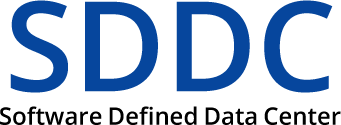
<style>
.page{position:relative;width:341px;height:125px;background:#ffffff}
.page>*{position:absolute;margin:0}
.t1{font:125px "OpenSans-Semibold";color:#06469d}
.t2{font:24px "OpenSans-Semibold";color:#000000}
</style>
<div class="page">
<p class="t1" style="left:10px;top:0px;width:323px;height:93px">SDDC</p>
<p class="t2" style="left:0px;top:106px;width:341px;height:19px">Software Defined Data Center</p>
</div>
